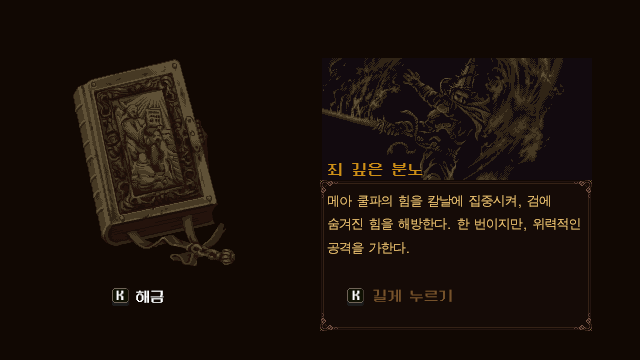
<style>
.page{position:relative;width:640px;height:360px;background:#110803}
.page>*{position:absolute;margin:0}
.t1{font:12px "NeoDunggeunmo-Regular";color:#cd8f17}
.t2{font:13.3px "DotumChe";letter-spacing:-0.1em;color:#ffd179}
.t3{font:14.7px "NeoDunggeunmo-Regular";color:#ffffff}
.t4{font:14.7px "NeoDunggeunmo-Regular";color:#76522b}
</style>
<div class="page">
<p class="t1" style="left:328px;top:163px;width:95px;height:13px">죄 깊은 분노</p>
<p class="t2" style="left:327px;top:195px;width:253px;height:59px">메아 쿨파의 힘을 칼날에 집중시켜, 검에<br>숨겨진 힘을 해방한다. 한 번이지만, 위력적인<br>공격을 가한다.</p>
<p class="t3" style="left:116px;top:290px;width:8px;height:10px">K</p>
<p class="t3" style="left:136px;top:290px;width:28px;height:13px">해금</p>
<p class="t3" style="left:352px;top:290px;width:8px;height:10px">K</p>
<p class="t4" style="left:373px;top:289px;width:79px;height:13px">길게 누르기</p>
</div>
